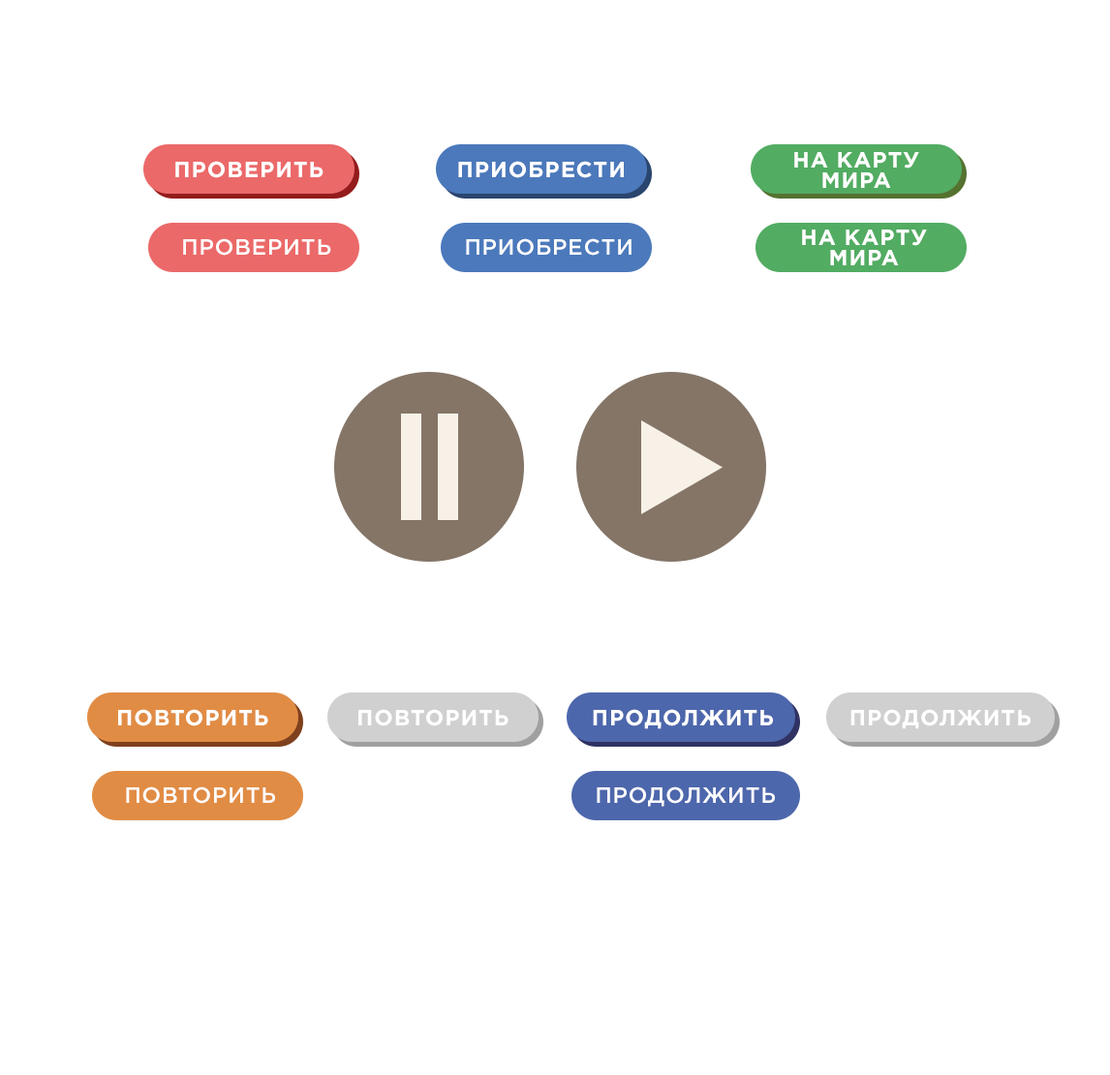
<style>
.page{position:relative;width:1110px;height:1075px;background:#ffffff}
.page>*{position:absolute;margin:0}
.t1{font:22.2px "GothamPro-Bold";letter-spacing:0.04em;color:#ffffff}
.t2{font:22.2px/20.2px "GothamPro-Bold";letter-spacing:0.04em;color:#ffffff;text-transform:uppercase}
.t3{font:22.2px "GothamPro-Medium";letter-spacing:0.04em;color:#ffffff}
.t4{font:22.2px "GothamPro-Bold";letter-spacing:0.04em;color:#ffffff;text-transform:uppercase}
.t5{font:22.2px "GothamPro-Medium";letter-spacing:0.04em;color:#ffffff;text-transform:uppercase}
</style>
<div class="page">
<p class="t1" style="left:175px;top:161px;width:148px;height:17px">ПРОВЕРИТЬ</p>
<p class="t1" style="left:458px;top:161px;width:166px;height:17px">ПРИОБРЕСТИ</p>
<p class="t2" style="left:794px;top:152px;width:125px;height:36px;text-align:center">На карту<br>мира</p>
<p class="t2" style="left:802px;top:229px;width:125px;height:36px;text-align:center">На карту<br>мира</p>
<p class="t3" style="left:183px;top:238px;width:148px;height:18px">ПРОВЕРИТЬ</p>
<p class="t3" style="left:466px;top:238px;width:165px;height:18px">ПРИОБРЕСТИ</p>
<p class="t4" style="left:118px;top:709px;width:150px;height:17px">Повторить</p>
<p class="t4" style="left:358px;top:709px;width:150px;height:17px">Повторить</p>
<p class="t4" style="left:593px;top:709px;width:180px;height:20px">ПРОДОЛЖИТЬ</p>
<p class="t4" style="left:850px;top:709px;width:180px;height:20px">ПРОДОЛЖИТЬ</p>
<p class="t5" style="left:126px;top:786px;width:149px;height:18px">Повторить</p>
<p class="t5" style="left:596px;top:786px;width:179px;height:21px">ПРОДОлЖИТЬ</p>
</div>
